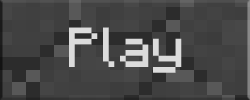
<style>
.page{position:relative;width:250px;height:100px}
.page>*{position:absolute;margin:0}
.t1{font:45px "Minecraftia";color:#dcdcdc}
</style>
<div class="page">
<p class="t1" style="left:69px;top:27px;width:113px;height:46px">Play</p>
</div>
